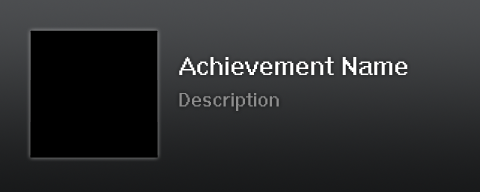
<style>
.page{position:relative;width:480px;height:192px}
.page>*{position:absolute;margin:0}
.t1{font:24px "System";color:#ffffff}
.t2{font:18px "System";color:#8e8e8e}
</style>
<div class="page">
<p class="t1" style="left:179px;top:57px;width:229px;height:18px">Achievement Name</p>
<p class="t2" style="left:179px;top:93px;width:100px;height:18px">Description</p>
</div>
